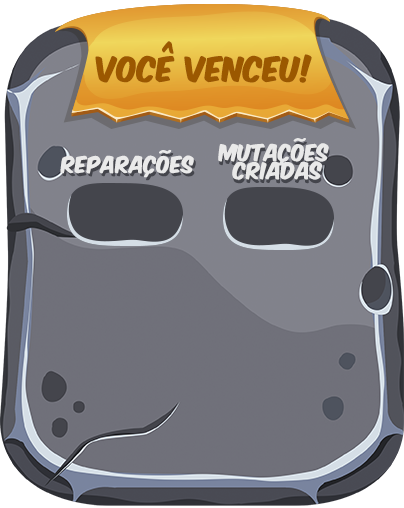
<style>
.page{position:relative;width:404px;height:508px}
.page>*{position:absolute;margin:0}
.t1{font:29.4px "KomikaAxis";letter-spacing:0.01em;color:#9b5800}
.t2{font:19.6px "KomikaAxis";letter-spacing:0.01em;color:#eaeaea}
.t3{font:19.6px/18px "KomikaAxis";letter-spacing:0.01em;color:#e9e9e9}
</style>
<div class="page">
<p class="t1" style="left:95px;top:41px;width:217px;height:42px">Você venceu!</p>
<p class="t2" style="left:60px;top:149px;width:134px;height:29px">REPARAÇÕES</p>
<p class="t3" style="left:218px;top:138px;width:111px;height:42px;text-align:center">mutações <br>criadas</p>
</div>
